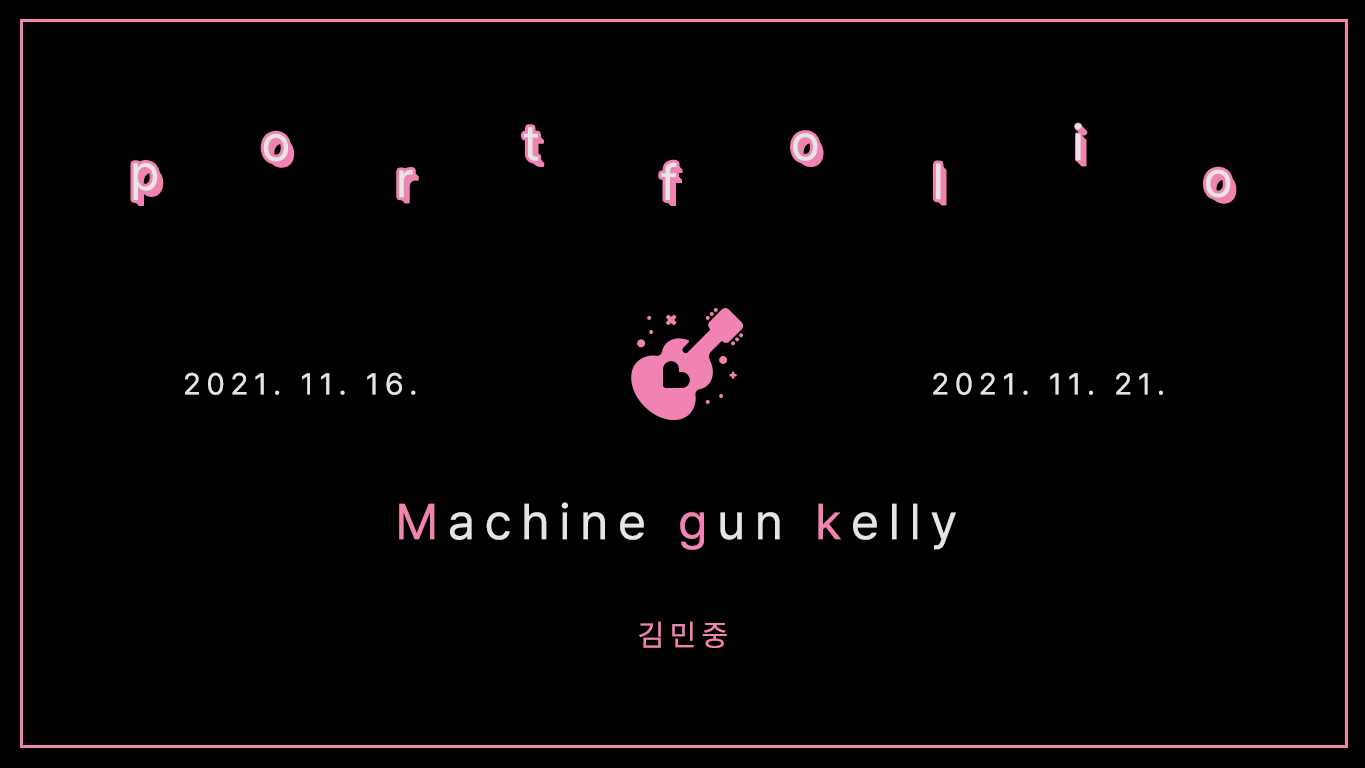
<style>
.page{position:relative;width:1365px;height:768px;background:#000000}
.page>*{position:absolute;margin:0}
.t1{font:50px "Pretendard-Regular";letter-spacing:0.2em;color:#e5e5e5}
.t2{font:30px "Pretendard-Regular";letter-spacing:0.2em;color:#e5e5e5}
.t3{font:50px "Pretendard-Regular";letter-spacing:0.2em;color:#f183b2}
.t4{font:30px "Pretendard-Regular";letter-spacing:0.2em;color:#f183b2}
</style>
<div class="page">
<p class="t1" style="left:1075px;top:123px;width:7px;height:38px">i</p>
<p class="t1" style="left:263px;top:133px;width:26px;height:29px">o</p>
<p class="t1" style="left:524px;top:127px;width:15px;height:34px">t</p>
<p class="t1" style="left:793px;top:133px;width:25px;height:28px">o</p>
<p class="t1" style="left:133px;top:163px;width:25px;height:37px">p</p>
<p class="t1" style="left:399px;top:170px;width:14px;height:28px">r</p>
<p class="t1" style="left:661px;top:162px;width:16px;height:38px">f</p>
<p class="t1" style="left:936px;top:163px;width:5px;height:37px">l</p>
<p class="t1" style="left:1206px;top:169px;width:25px;height:29px">o</p>
<p class="t2" style="left:185px;top:372px;width:231px;height:23px">2021. 11. 16.</p>
<p class="t2" style="left:933px;top:372px;width:230px;height:23px">2021. 11. 21.</p>
<p class="t1" style="left:399px;top:502px;width:557px;height:48px"><span class="t3">M</span>achine<span class="t3"> g</span>un <span class="t3">k</span>elly</p>
<p class="t4" style="left:639px;top:621px;width:88px;height:27px">김민중</p>
</div>
